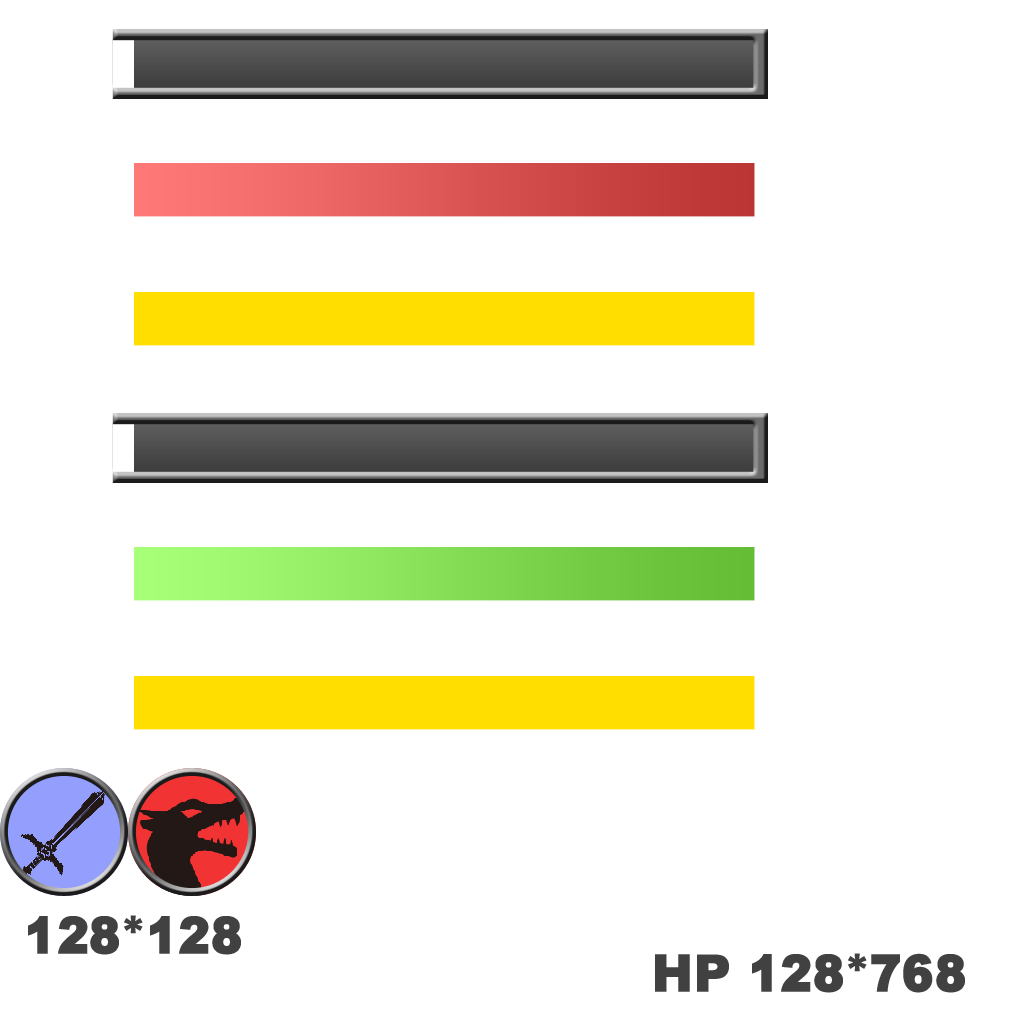
<style>
.page{position:relative;width:1024px;height:1024px;background:#ffffff}
.page>*{position:absolute;margin:0}
.t1{font:53.4px "DHPGothic-EB-WIN-RKSJ-H";color:#414141}
</style>
<div class="page">
<p class="t1" style="left:28px;top:915px;width:213px;height:40px">128*128</p>
<p class="t1" style="left:655px;top:953px;width:310px;height:40px">HP 128*768</p>
</div>
